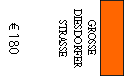
<style>
.page{position:relative;width:124px;height:76px;background:#ffffff}
.page>*{position:absolute;margin:0}
.t1{font:12px "AdobeDevanagari-Regular";color:#000000;scale:0.9 1}
.t2{font:14px "MyriadPro-Regular";color:#000000}
</style>
<div class="page">
<p class="t1" style="left:59px;top:9px;width:37px;height:59px;text-align:center;rotate:90deg">GROSSE <br>DIESDORFER<br>STRASSE</p>
<p class="t2" style="left:9px;top:23px;width:10px;height:31px;rotate:90deg">€ 180</p>
</div>
